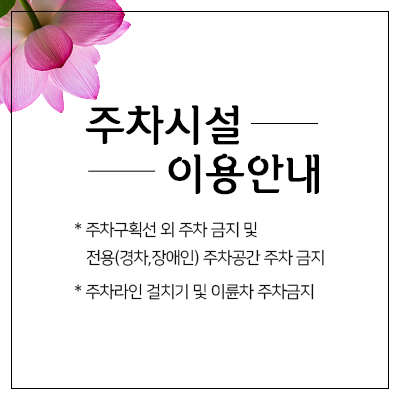
<style>
.page{position:relative;width:400px;height:400px;background:#ffffff}
.page>*{position:absolute;margin:0}
.t1{font:41.7px "THEDodamM";letter-spacing:-0.01em;color:#000000;font-weight:bold}
.t2{font:16.7px/27.8px "NanumSquare_acR";letter-spacing:-0.01em;color:#0e0e0e}
.t3{font:16.7px "NanumSquare_acR";letter-spacing:-0.01em;color:#0e0e0e}
</style>
<div class="page">
<p class="t1" style="left:85px;top:105px;width:154px;height:40px">주차시설</p>
<p class="t1" style="left:168px;top:153px;width:151px;height:42px">이용안내</p>
<p class="t2" style="left:75px;top:221px;width:249px;height:46px">* 주차구획선 외 주차 금지 및<br>   전용(경차,장애인) 주차공간 주차 금지</p>
<p class="t3" style="left:75px;top:283px;width:239px;height:17px">* 주차라인 걸치기 및 이륜차 주차금지</p>
</div>
